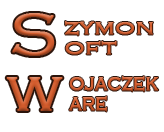
<style>
.page{position:relative;width:164px;height:132px;background:#ffffff}
.page>*{position:absolute;margin:0}
.t1{font:60px "CopperplateGothic-Light";font-weight:bold}
.t2{font:23px/20px "CopperplateGothic-Light";font-weight:bold;scale:1.14 1}
.t3{font:23px/20px "CopperplateGothic-Light";font-weight:bold;scale:0.86 1}
</style>
<div class="page">
<p class="t1" style="left:12px;top:13px;width:43px;height:43px">S</p>
<p class="t2" style="left:65px;top:21px;width:88px;height:34px">zymon<br>oft</p>
<p class="t1" style="left:6px;top:77px;width:57px;height:34px">w</p>
<p class="t3" style="left:69px;top:76px;width:90px;height:36px">ojaczek<br>are</p>
</div>
